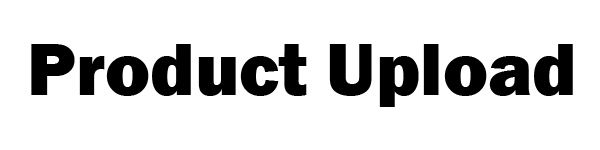
<style>
.page{position:relative;width:600px;height:150px;background:#ffffff}
.page>*{position:absolute;margin:0}
.t1{font:75.8px "FranklinGothic-Heavy";color:#000000}
</style>
<div class="page">
<p class="t1" style="left:31px;top:44px;width:542px;height:63px">Product Upload</p>
</div>
